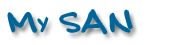
<style>
.page{position:relative;width:191px;height:45px;background:#ffffff}
.page>*{position:absolute;margin:0}
.t1{font:30px "BobbiesHand";color:#006699}
.t2{font:18px "BobbiesHand";color:#006699}
</style>
<div class="page">
<p class="t1" style="left:8px;top:10px;width:124px;height:24px">M<span class="t2">Y </span>SAN</p>
</div>
